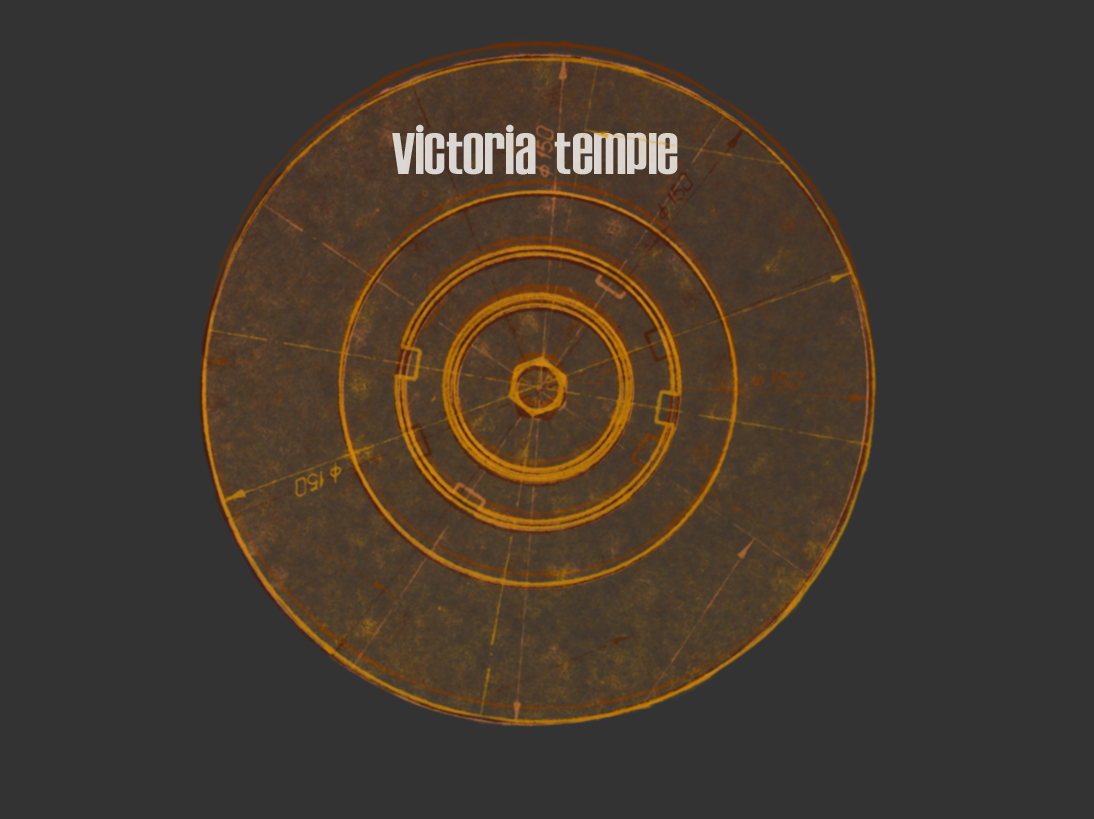
<style>
.page{position:relative;width:1094px;height:819px;background:#333333}
.page>*{position:absolute;margin:0}
.t1{font:60px "Establo";color:#dcd9d9}
</style>
<div class="page">
<p class="t1" style="left:392px;top:124px;width:286px;height:51px">victoria temple</p>
</div>
